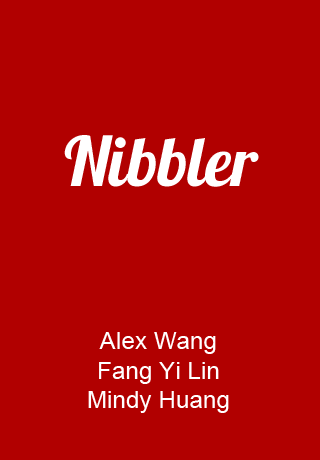
<style>
.page{position:relative;width:320px;height:460px;background:#b10000}
.page>*{position:absolute;margin:0}
.t1{font:68.1px "Lobster1.4";color:#ffffff}
.t2{font:24.3px "ArialMT";color:#ffffff}
</style>
<div class="page">
<p class="t1" style="left:64px;top:135px;width:195px;height:52px">Nibbler</p>
<p class="t2" style="left:88px;top:332px;width:141px;height:81px;text-align:center">Alex Wang<br>Fang Yi Lin<br>Mindy Huang</p>
</div>
